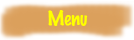
<style>
.page{position:relative;width:134px;height:40px}
.page>*{position:absolute;margin:0}
.t1{font:18px "MarkerFelt-Thin";color:#ffff00}
</style>
<div class="page">
<p class="t1" style="left:48px;top:10px;width:40px;height:16px">Menu</p>
</div>
